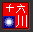
<style>
.page{position:relative;width:33px;height:32px;background:#f20000}
.page>*{position:absolute;margin:0}
.t1{font:10.4px "SimSun";color:#ffffff}
.t2{font:11.7px "SimSun";color:#ffffff}
</style>
<div class="page">
<p class="t1" style="left:6px;top:4px;width:19px;height:9px">十六</p>
<p class="t2" style="left:16px;top:15px;width:11px;height:12px">川</p>
</div>
